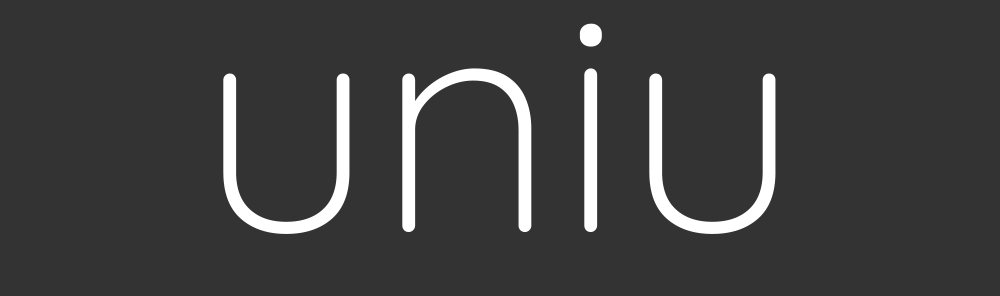
<style>
.page{position:relative;width:1000px;height:296px;background:#333333}
.page>*{position:absolute;margin:0}
.t1{font:317.6px "Quicksand-Light";color:#ffffff}
</style>
<div class="page">
<p class="t1" style="left:223px;top:23px;width:553px;height:211px">uniu</p>
</div>
